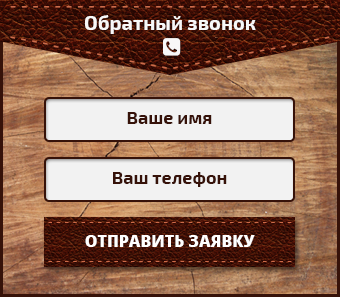
<style>
.page{position:relative;width:340px;height:297px}
.page>*{position:absolute;margin:0}
.t1{font:19px "OpenSans";letter-spacing:0.004em;color:#cc6b4a;text-transform:uppercase}
.t2{font:20px "Exo2-Bold";color:#f8f8f8}
.t3{font:18px "Exo2-Bold";color:#361209}
.t4{font:14px "OpenSans";letter-spacing:0.004em;color:#cc6b4a;text-transform:uppercase}
.t5{font:16px "OpenSans-Extrabold";color:#ffffff;text-transform:uppercase}
</style>
<div class="page">
<p class="t1" style="left:10px;top:6px;width:320px;height:2px">- - - - - - - - - - - - - - - - - - - - - - - - - - - - -</p>
<p class="t2" style="left:84px;top:15px;width:172px;height:19px">Обратный звонок</p>
<p class="t3" style="left:127px;top:112px;width:85px;height:12px">Ваше имя</p>
<p class="t3" style="left:113px;top:172px;width:114px;height:15px">Ваш телефон</p>
<p class="t4" style="left:48px;top:222px;width:244px;height:1px">- - - - - - - - - - - - - - - - - - - - - - - - - - - - - -</p>
<p class="t5" style="left:85px;top:235px;width:170px;height:12px">Отправить заявку</p>
<p class="t4" style="left:48px;top:261px;width:244px;height:1px">- - - - - - - - - - - - - - - - - - - - - - - - - - - - - -</p>
</div>
